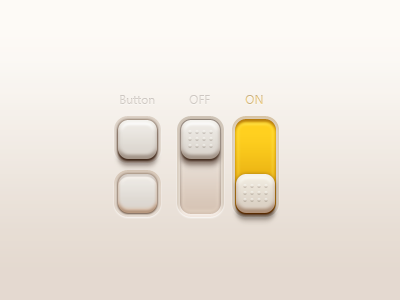
<style>
.page{position:relative;width:400px;height:300px}
.page>*{position:absolute;margin:0}
.t1{font:12px "SegoeUI";color:#d6d1ca}
.t2{font:12px "SegoeUI";color:#cdc7c2}
.t3{font:12px "SegoeUI"}
</style>
<div class="page">
<p class="t1" style="left:120px;top:95px;width:35px;height:9px">Button</p>
<p class="t2" style="left:189px;top:95px;width:21px;height:9px">OFF</p>
<p class="t3" style="left:245px;top:95px;width:18px;height:9px">ON</p>
</div>
